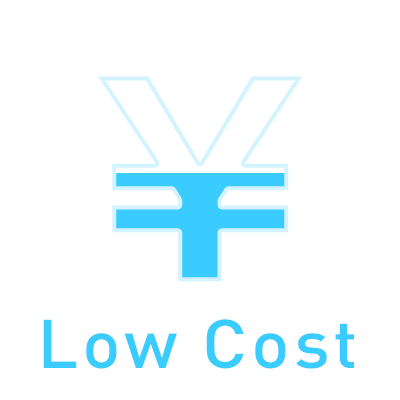
<style>
.page{position:relative;width:400px;height:400px;background:#ffffff}
.page>*{position:absolute;margin:0}
.t1{font:259.5px "ShinGoPro-Bold";letter-spacing:0.05em}
.t2{font:67.7px "DINPro-Medium";letter-spacing:0.05em;color:#3acbff;scale:1.06 1}
</style>
<div class="page">
<p class="t1" style="left:98px;top:76px;width:205px;height:206px">￥</p>
<p class="t2" style="left:43px;top:319px;width:311px;height:50px">Low Cost</p>
</div>
